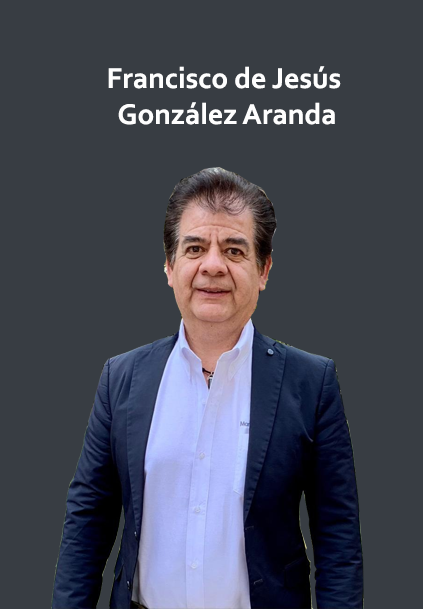
<style>
.page{position:relative;width:423px;height:609px;background:#383d43}
.page>*{position:absolute;margin:0}
.t1{font:30px "Corbel-Bold";color:#fefefe}
</style>
<div class="page">
<p class="t1" style="left:108px;top:66px;width:233px;height:59px;text-align:center">Francisco de Jesús <br>González Aranda</p>
</div>
